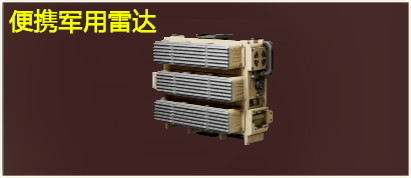
<style>
.page{position:relative;width:411px;height:178px}
.page>*{position:absolute;margin:0}
.t1{font:24px "MicrosoftYaHeiUI";color:#f4ff00;font-weight:bold}
</style>
<div class="page">
<p class="t1" style="left:9px;top:9px;width:148px;height:25px">便携军用雷达</p>
</div>
